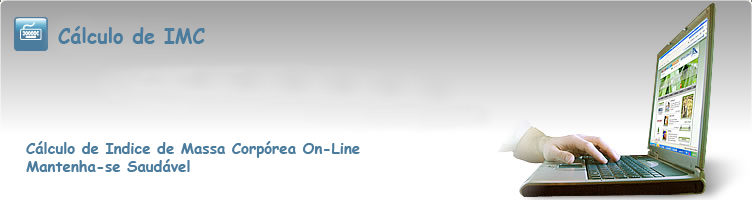
<style>
.page{position:relative;width:752px;height:200px;background:#ffffff}
.page>*{position:absolute;margin:0}
.t1{font:20px "ComicSansMS-Bold";color:#4b7c9d}
.t2{font:15px "ComicSansMS-Bold";color:#4b7c9d}
</style>
<div class="page">
<p class="t1" style="left:58px;top:26px;width:147px;height:18px">Cálculo de IMC</p>
<p class="t2" style="left:26px;top:141px;width:334px;height:31px">Cálculo de Indice de Massa Corpórea On-Line<br>Mantenha-se Saudável</p>
</div>
